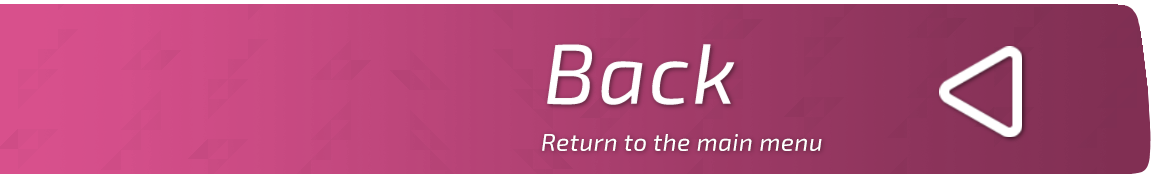
<style>
.page{position:relative;width:1166px;height:178px}
.page>*{position:absolute;margin:0}
.t1{font:24px "Exo2.0-Italic";letter-spacing:0.025em;color:#ffffff}
</style>
<div class="page">
<p class="t1" style="left:542px;top:134px;width:280px;height:17px">Return to the main menu</p>
</div>
